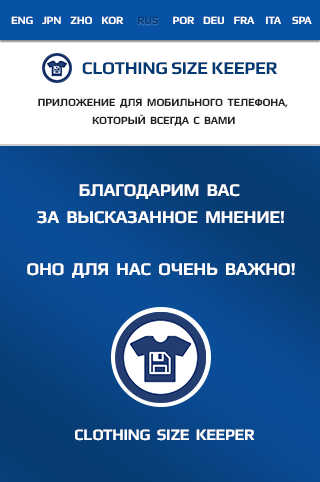
<style>
.page{position:relative;width:320px;height:482px;background:#ffffff}
.page>*{position:absolute;margin:0}
.t1{font:11px "Play-Bold";letter-spacing:-0.025em;color:#ffffff;text-transform:uppercase}
.t2{font:11px "Play-Bold";letter-spacing:-0.025em;color:#033a73;text-transform:uppercase}
.t3{font:18px "Play-Bold";letter-spacing:-0.025em;color:#033a73;text-transform:uppercase}
.t4{font:11px "Play-Bold";letter-spacing:-0.025em;color:#212121;text-transform:uppercase}
.t5{font:18px "Play-Bold";letter-spacing:-0.025em;color:#ffffff;text-transform:uppercase}
.t6{font:16px "Play-Bold";letter-spacing:-0.025em;color:#ffffff;text-transform:uppercase}
</style>
<div class="page">
<p class="t1" style="left:11px;top:16px;width:301px;height:8px">ENG    JPN    ZHO    KOR                      POR    DEU    FRA     ITA     SPA</p>
<p class="t2" style="left:138px;top:16px;width:20px;height:8px">RUS</p>
<p class="t3" style="left:82px;top:62px;width:196px;height:13px">Clothing Size Keeper</p>
<p class="t4" style="left:38px;top:98px;width:250px;height:28px;text-align:center">Приложение  для  мобильного  телефона, <br>который  всегда  с  Вами</p>
<p class="t5" style="left:27px;top:184px;width:268px;height:94px;text-align:center">Благодарим  Вас <br>за  высказанное  мнение!<br><br>Оно  для  нас  очень  важно!</p>
<p class="t6" style="left:75px;top:429px;width:180px;height:12px">Clothing  Size  Keeper</p>
</div>
